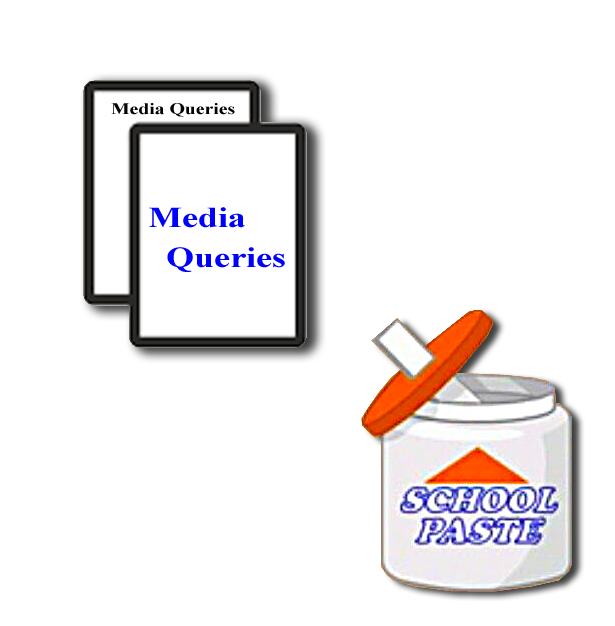
<style>
.page{position:relative;width:615px;height:626px;background:#ffffff}
.page>*{position:absolute;margin:0}
.t1{font:16px "TimesNewRomanPS-BoldMT";color:#030303;scale:1.23 1}
.t2{font:29.3px "TimesNewRomanPS-BoldMT";color:#0000ff;scale:1.23 1}
</style>
<div class="page">
<p class="t1" style="left:111px;top:103px;width:124px;height:14px">Media Queries</p>
<p class="t2" style="left:149px;top:207px;width:96px;height:21px">Media</p>
<p class="t2" style="left:167px;top:247px;width:118px;height:25px">Queries</p>
</div>
